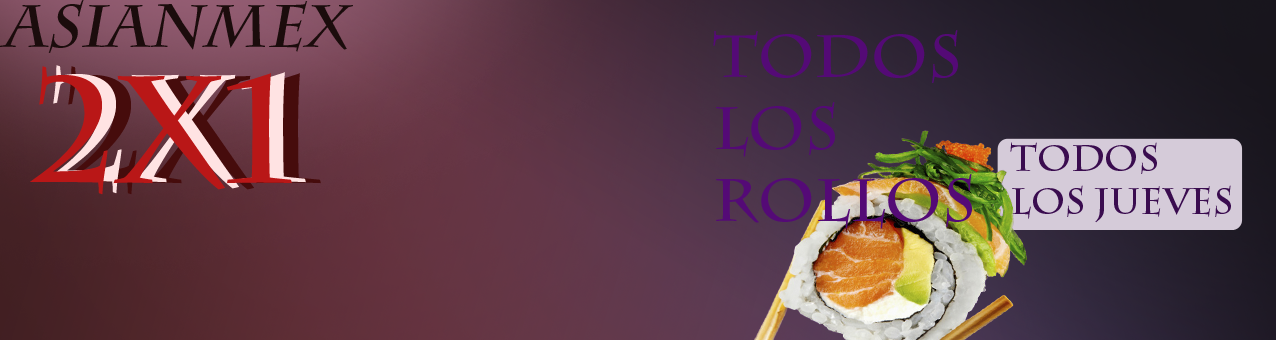
<style>
.page{position:relative;width:1276px;height:340px}
.page>*{position:absolute;margin:0}
.t1{font:60px "CharlemagneStd-Bold";color:#1b0c0c;font-variant:small-caps;font-style:italic}
.t2{font:60px "CharlemagneStd-Bold";color:#540a76}
.t3{font:150px "CharlemagneStd-Bold";color:#ffe3e3}
.t4{font:150px "CharlemagneStd-Bold";color:#b91717}
.t5{font:36px "CharlemagneStd-Bold";color:#3a0c4f}
</style>
<div class="page">
<p class="t1" style="left:0px;top:0px;width:353px;height:53px">ASIANMEX</p>
<p class="t2" style="left:713px;top:30px;width:259px;height:199px">Todos <br>los <br>rollos</p>
<p class="t3" style="left:44px;top:65px;width:262px;height:129px">2X1</p>
<p class="t4" style="left:30px;top:66px;width:262px;height:129px">2X1</p>
<p class="t5" style="left:1010px;top:142px;width:221px;height:81px">todos <br>los jueves</p>
</div>
